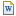
<style>
.page{position:relative;width:16px;height:16px;background:#ffffff}
.page>*{position:absolute;margin:0}
.t1{font:7px "TimesNewRomanPSMT";color:#194c7b}
</style>
<div class="page">
<p class="t1" style="left:5px;top:6px;width:7px;height:6px">W</p>
</div>
